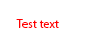
<style>
.page{position:relative;width:100px;height:50px;background:#ffffff}
.page>*{position:absolute;margin:0}
.t1{font:12px "MyriadPro-Regular";color:#ff0000}
</style>
<div class="page">
<p class="t1" style="left:16px;top:19px;width:43px;height:9px">Test text</p>
</div>
